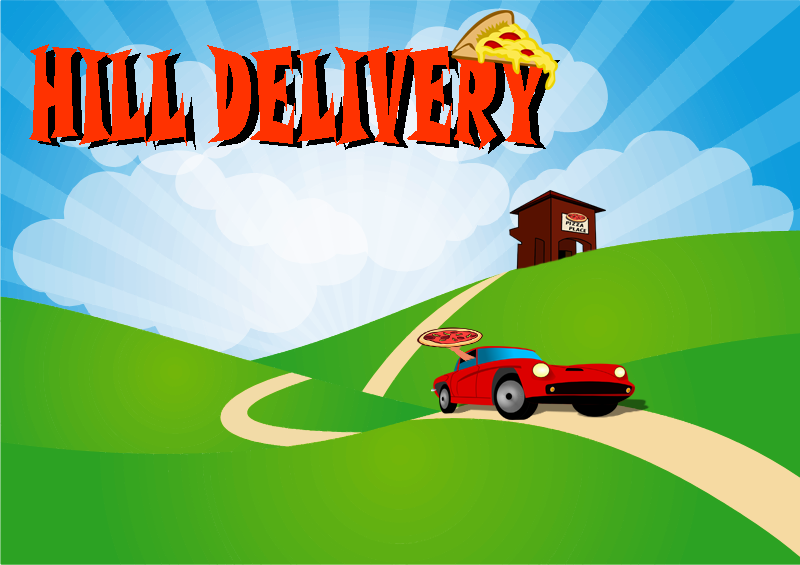
<style>
.page{position:relative;width:800px;height:565px}
.page>*{position:absolute;margin:0}
.t1{font:130.4px "SnapITC-Regular";color:#ff3200;scale:0.42 1}
.t2{font:130.4px "SnapITC-Regular";scale:0.42 1}
</style>
<div class="page">
<p class="t1" style="left:29px;top:44px;width:522px;height:106px">HILL DELIVERY</p>
<p class="t2" style="left:38px;top:48px;width:522px;height:106px">HILL DELIVERY</p>
</div>
